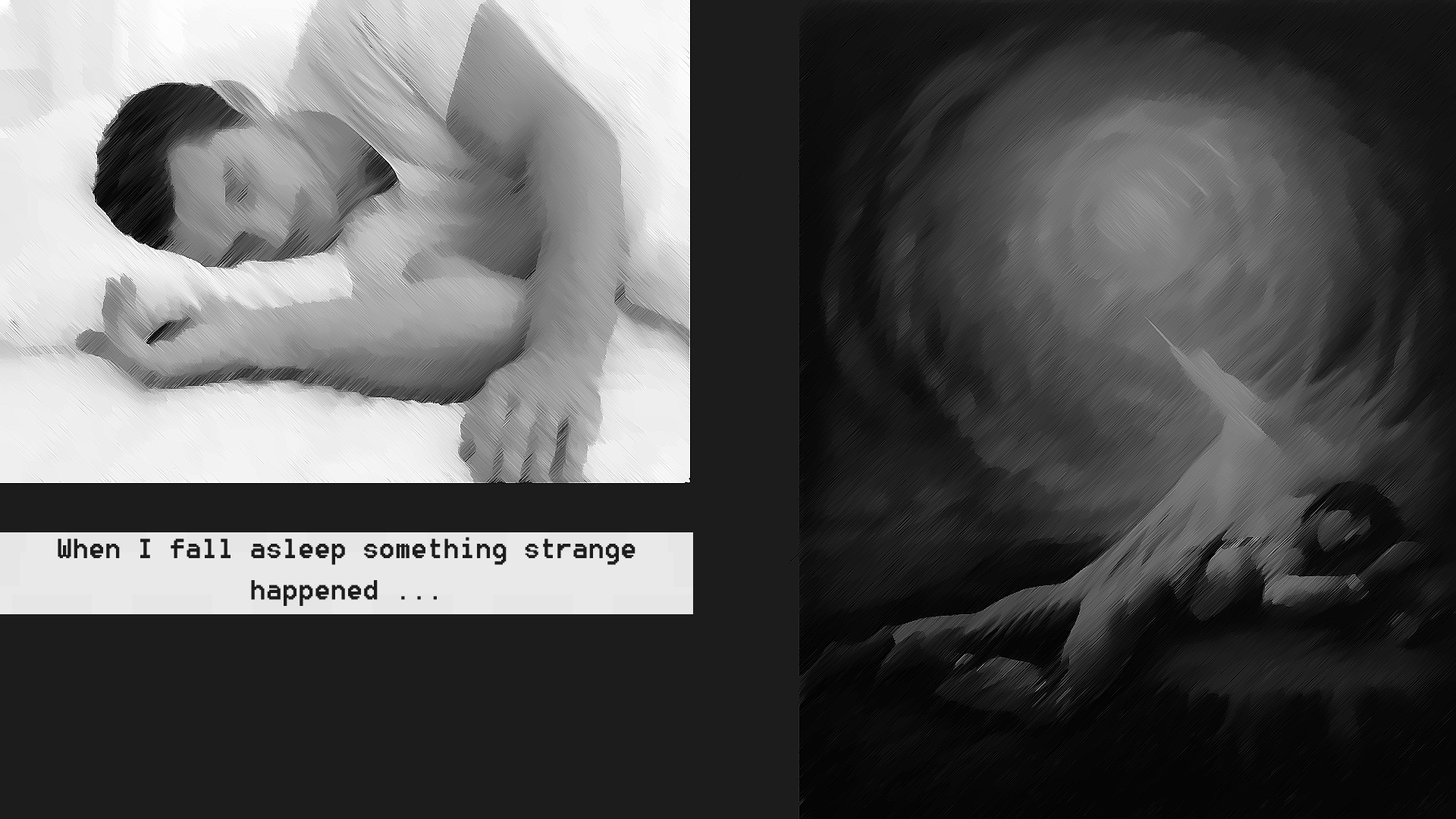
<style>
.page{position:relative;width:1456px;height:819px;background:#1c1c1c}
.page>*{position:absolute;margin:0}
.t1{font:34.4px "8514oem";color:#1c1c1c}
</style>
<div class="page">
<p class="t1" style="left:58px;top:537px;width:577px;height:69px;text-align:center">When I fall asleep something strange happened ...</p>
</div>
